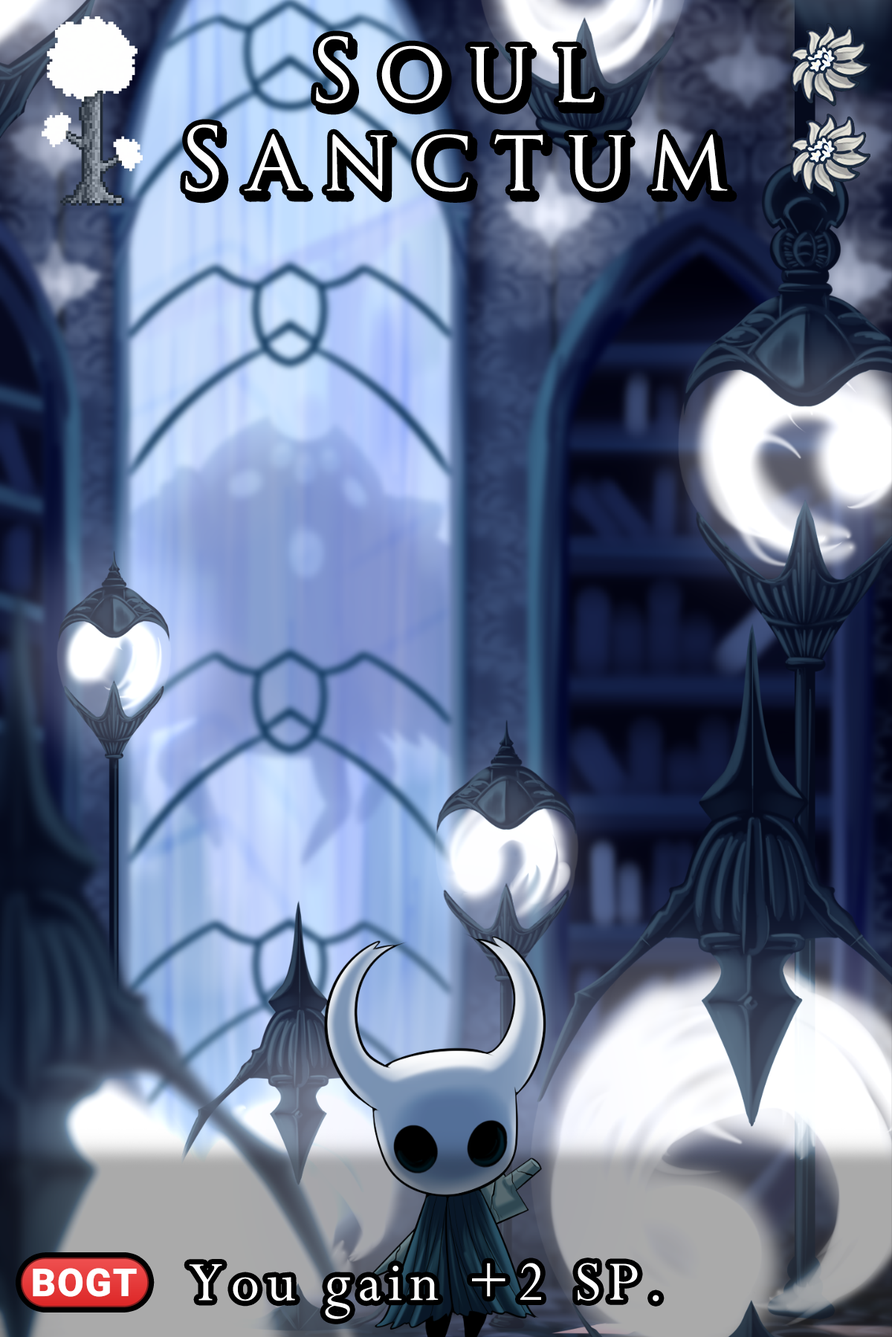
<style>
.page{position:relative;width:892px;height:1337px}
.page>*{position:absolute;margin:0}
.t1{font:147.3px/88.4px "TrajanPro-Regular";letter-spacing:0.24em;color:#ffffff}
.t2{font:107px "Perpetua";letter-spacing:0.12em}
.t3{font:87.1px "stoogedings-Regular";letter-spacing:0.12em}
</style>
<div class="page">
<p class="t1" style="left:185px;top:36px;width:542px;height:156px;text-align:center">Soul<br>Sanctum</p>
<p class="t2" style="left:21px;top:1258px;width:638px;height:62px"><span class="t3">(BOGT) </span>You gain +2 SP.</p>
</div>
